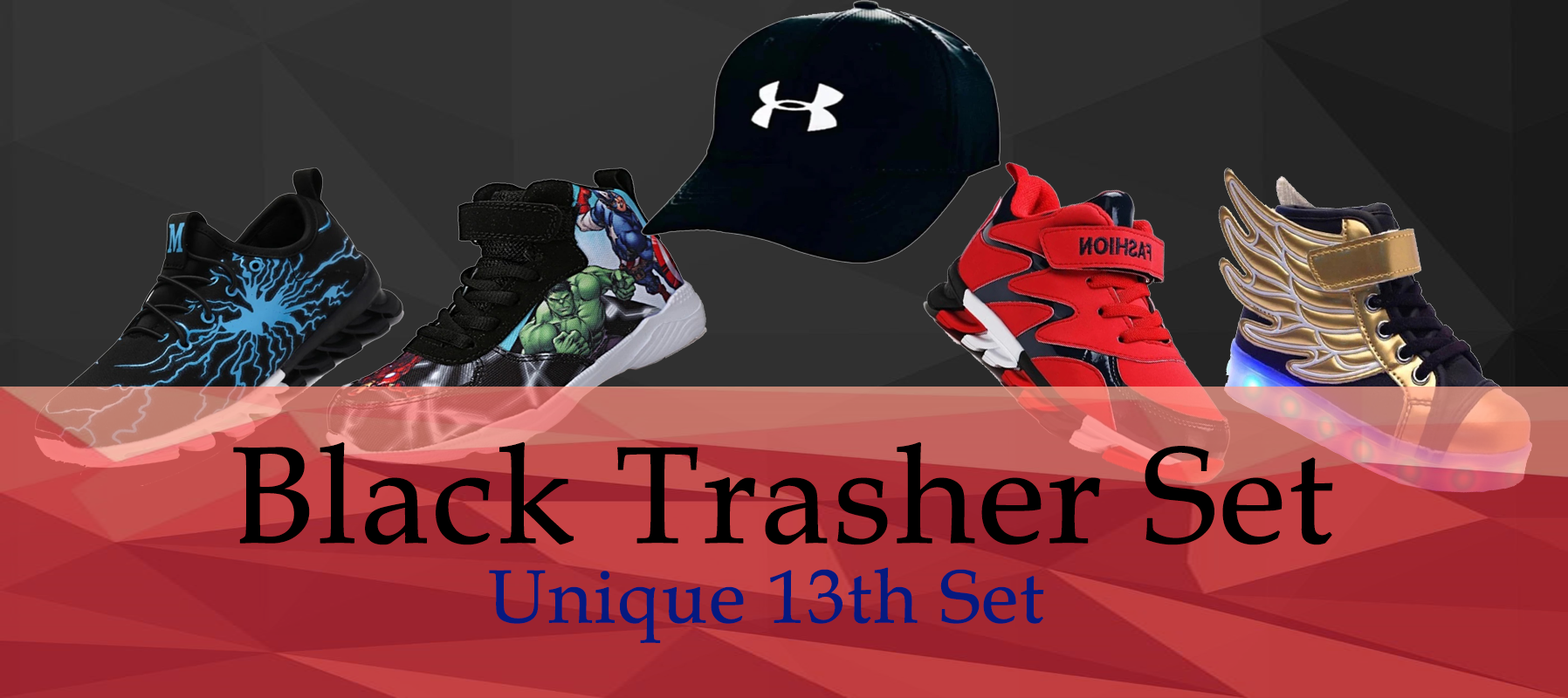
<style>
.page{position:relative;width:1568px;height:698px}
.page>*{position:absolute;margin:0}
.t1{font:137.1px "BookAntiqua";color:#000000;font-weight:bold}
.t2{font:75.1px "BookAntiqua";color:#05197f;font-weight:bold}
</style>
<div class="page">
<p class="t1" style="left:233px;top:442px;width:1100px;height:104px">Black Trasher Set</p>
<p class="t2" style="left:489px;top:567px;width:555px;height:76px">Unique 13th Set</p>
</div>
